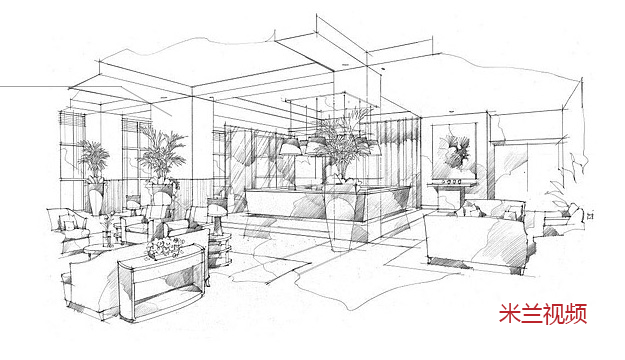
<style>
.page{position:relative;width:625px;height:360px;background:#ffffff}
.page>*{position:absolute;margin:0}
.t1{font:22px "MicrosoftYaHei";color:#bb242b}
</style>
<div class="page">
<p class="t1" style="left:499px;top:303px;width:88px;height:22px">米兰视频</p>
</div>
